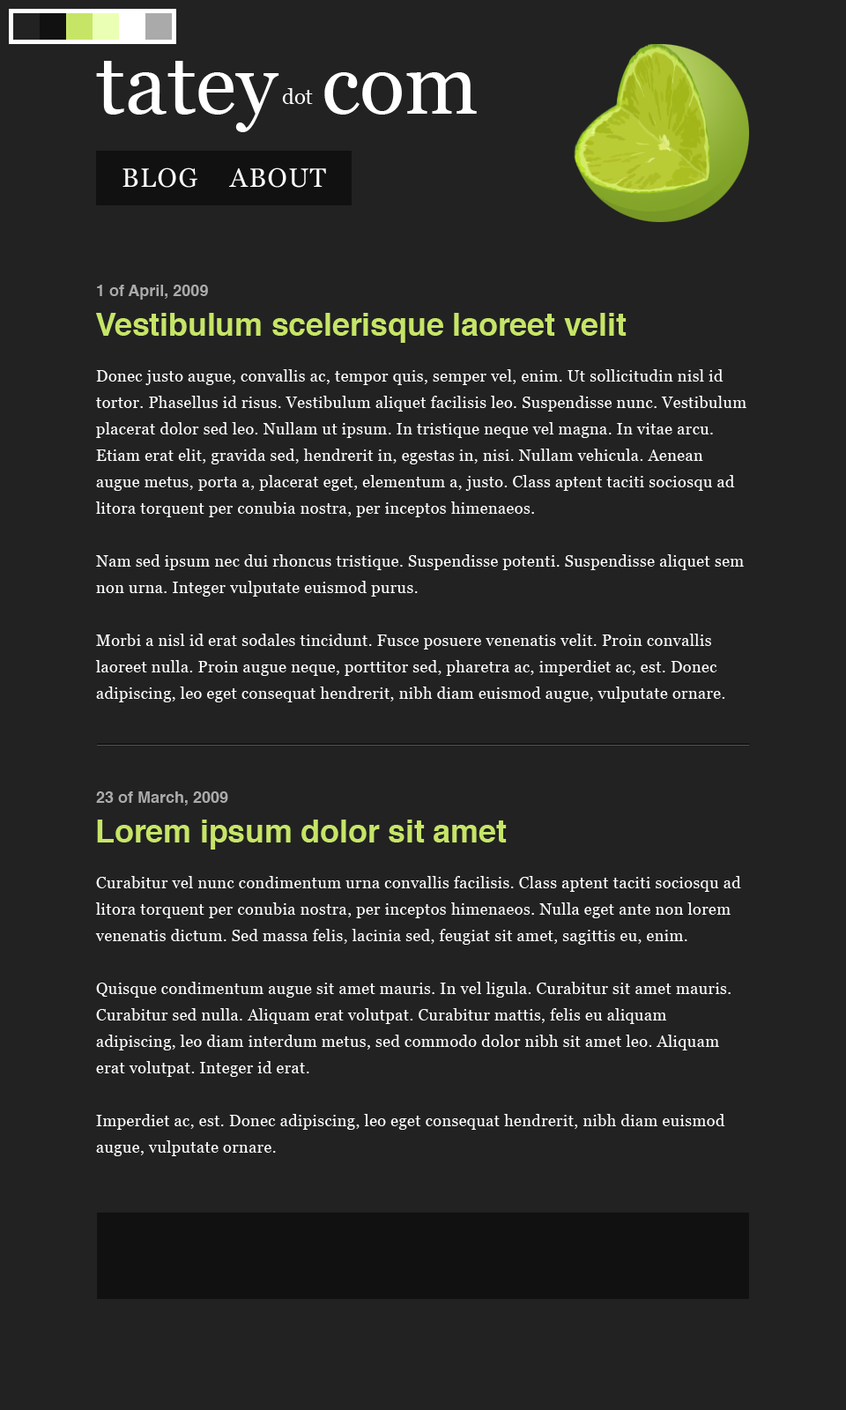
<style>
.page{position:relative;width:846px;height:1410px;background:#222222}
.page>*{position:absolute;margin:0}
.t1{font:83.7px "Georgia";color:#ffffff}
.t2{font:21.1px "Georgia";color:#ffffff}
.t3{font:26.4px "Georgia";letter-spacing:0.05em;color:#ffffff}
.t4{font:15.9px "Helvetica-Bold";color:#aaaaaa}
.t5{font:31.7px "Helvetica-Bold";letter-spacing:-0.006em;color:#c6e567}
.t6{font:15.9px/26.4px "Georgia";letter-spacing:0.025em;color:#ffffff}
</style>
<div class="page">
<p class="t1" style="left:96px;top:61px;width:183px;height:71px">tatey</p>
<p class="t1" style="left:324px;top:72px;width:153px;height:43px">com</p>
<p class="t2" style="left:282px;top:88px;width:31px;height:16px">dot</p>
<p class="t3" style="left:122px;top:167px;width:204px;height:21px">BLOG    ABOUT</p>
<p class="t4" style="left:97px;top:285px;width:111px;height:15px">1 of April, 2009</p>
<p class="t5" style="left:96px;top:313px;width:530px;height:30px">Vestibulum scelerisque laoreet velit</p>
<p class="t6" style="left:95px;top:369px;width:651px;height:333px">Donec justo augue, convallis ac, tempor quis, semper vel, enim. Ut sollicitudin nisl id tortor. Phasellus id risus. Vestibulum aliquet facilisis leo. Suspendisse nunc. Vestibulum placerat dolor sed leo. Nullam ut ipsum. In tristique neque vel magna. In vitae arcu. Etiam erat elit, gravida sed, hendrerit in, egestas in, nisi. Nullam vehicula. Aenean augue metus, porta a, placerat eget, elementum a, justo. Class aptent taciti sociosqu ad litora torquent per conubia nostra, per inceptos himenaeos. <br><br>Nam sed ipsum nec dui rhoncus tristique. Suspendisse potenti. Suspendisse aliquet sem non urna. Integer vulputate euismod purus. <br><br>Morbi a nisl id erat sodales tincidunt. Fusce posuere venenatis velit. Proin convallis laoreet nulla. Proin augue neque, porttitor sed, pharetra ac, imperdiet ac, est. Donec adipiscing, leo eget consequat hendrerit, nibh diam euismod augue, vulputate ornare.</p>
<p class="t4" style="left:96px;top:791px;width:132px;height:14px">23 of March, 2009</p>
<p class="t5" style="left:97px;top:819px;width:410px;height:30px">Lorem ipsum dolor sit amet</p>
<p class="t6" style="left:95px;top:876px;width:646px;height:280px">Curabitur vel nunc condimentum urna convallis facilisis. Class aptent taciti sociosqu ad litora torquent per conubia nostra, per inceptos himenaeos. Nulla eget ante non lorem venenatis dictum. Sed massa felis, lacinia sed, feugiat sit amet, sagittis eu, enim. <br><br>Quisque condimentum augue sit amet mauris. In vel ligula. Curabitur sit amet mauris. Curabitur sed nulla. Aliquam erat volutpat. Curabitur mattis, felis eu aliquam adipiscing, leo diam interdum metus, sed commodo dolor nibh sit amet leo. Aliquam erat volutpat. Integer id erat.<br><br>Imperdiet ac, est. Donec adipiscing, leo eget consequat hendrerit, nibh diam euismod augue, vulputate ornare.</p>
</div>
